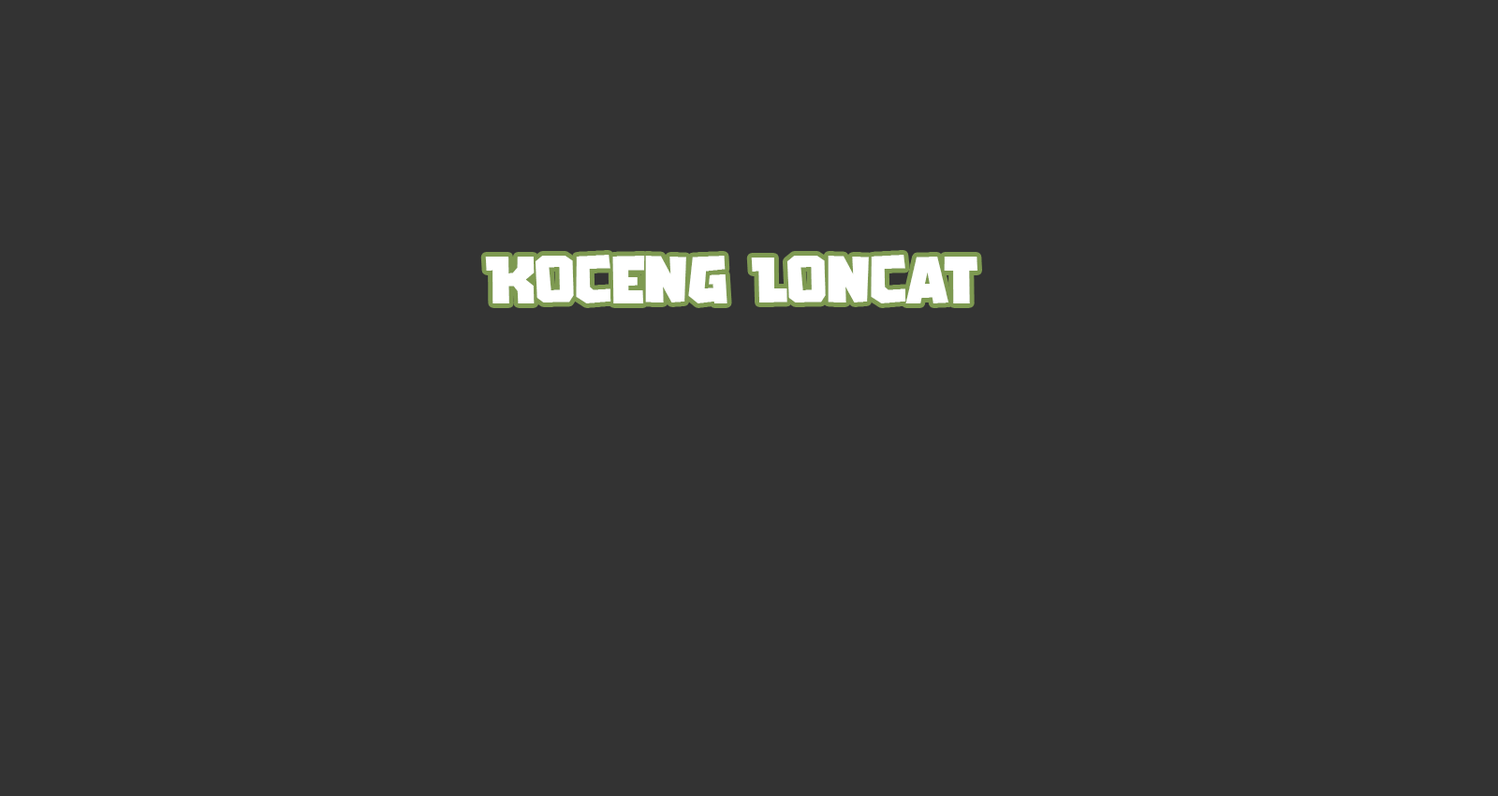
<style>
.page{position:relative;width:1498px;height:796px;background:#333333}
.page>*{position:absolute;margin:0}
.t1{font:67.4px "GAMERIA";color:#ffffff}
</style>
<div class="page">
<p class="t1" style="left:485px;top:255px;width:493px;height:48px">Koceng Loncat</p>
</div>
